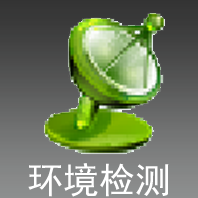
<style>
.page{position:relative;width:198px;height:198px}
.page>*{position:absolute;margin:0}
.t1{font:36px "SimHei";color:#ffffff}
</style>
<div class="page">
<p class="t1" style="left:28px;top:163px;width:141px;height:34px">环境检测</p>
</div>
